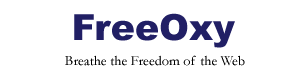
<style>
.page{position:relative;width:300px;height:80px;background:#ffffff}
.page>*{position:absolute;margin:0}
.t1{font:36px "Arial-Black";color:#211f65}
.t2{font:14px "Garamond";color:#000000}
</style>
<div class="page">
<p class="t1" style="left:74px;top:13px;width:161px;height:35px">FreeOxy</p>
<p class="t2" style="left:65px;top:55px;width:180px;height:11px">Breathe the Freedom of the Web</p>
</div>
